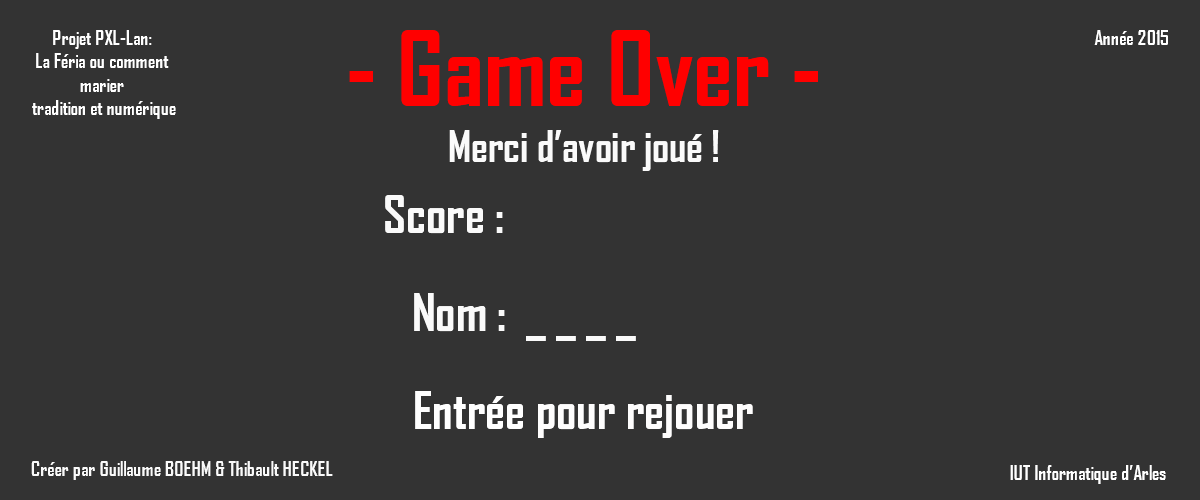
<style>
.page{position:relative;width:1200px;height:500px;background:#333333}
.page>*{position:absolute;margin:0}
.t1{font:19.4px "AgencyFB-Bold";color:#ffffff}
.t2{font:100px "AgencyFB-Bold";color:#ff0000}
.t3{font:41.7px "AgencyFB-Bold";color:#fafafa}
.t4{font:50px "AgencyFB-Bold";color:#fafafa}
.t5{font:50px "AgencyFB-Bold";color:#fefdfd}
.t6{font:50px "AgencyFB-Bold";color:#ffffff}
.t7{font:19.4px "AgencyFB-Bold";color:#fafafa}
</style>
<div class="page">
<p class="t1" style="left:32px;top:30px;width:144px;height:89px;text-align:center">Projet PXL-Lan:<br> La Féria ou comment <br>marier<br> tradition et numérique</p>
<p class="t2" style="left:349px;top:30px;width:469px;height:76px">- Game Over -</p>
<p class="t1" style="left:1094px;top:30px;width:74px;height:15px">Année 2015</p>
<p class="t3" style="left:449px;top:130px;width:270px;height:41px">Merci d’avoir joué !</p>
<p class="t4" style="left:385px;top:195px;width:118px;height:39px">Score :</p>
<p class="t4" style="left:414px;top:293px;width:91px;height:39px">Nom :</p>
<p class="t4" style="left:526px;top:336px;width:110px;height:5px">_ _ _ _</p>
<p class="t5" style="left:415px;top:391px;width:338px;height:47px"><span class="t6">Entrée </span>pour rejouer</p>
<p class="t7" style="left:31px;top:461px;width:302px;height:19px">Créer par Guillaume BOEHM &amp; Thibault HECKEL</p>
<p class="t1" style="left:1010px;top:465px;width:156px;height:19px">IUT Informatique d’Arles</p>
</div>
